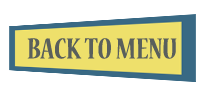
<style>
.page{position:relative;width:204px;height:94px;background:#ffffff}
.page>*{position:absolute;margin:0}
.t1{font:32px "NuevaStd-BoldCond";color:#595f5c;scale:0.93 1}
</style>
<div class="page">
<p class="t1" style="left:27px;top:38px;width:150px;height:21px">BACK TO MENU</p>
</div>
